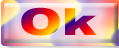
<style>
.page{position:relative;width:119px;height:48px}
.page>*{position:absolute;margin:0}
.t1{font:37.3px "Arial-Black";scale:1.39 1}
</style>
<div class="page">
<p class="t1" style="left:21px;top:7px;width:76px;height:29px">Ok</p>
</div>
